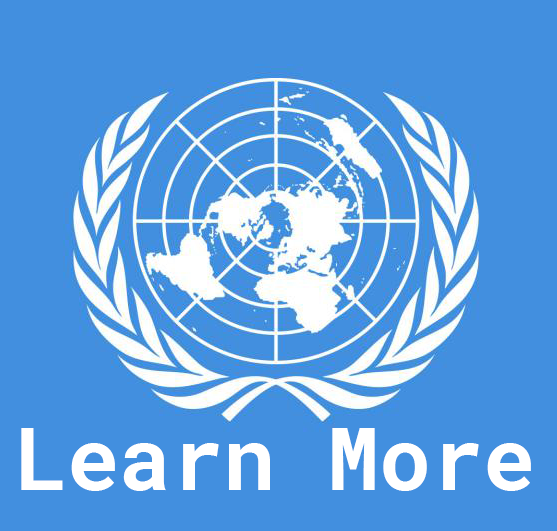
<style>
.page{position:relative;width:557px;height:531px;background:#428fdf}
.page>*{position:absolute;margin:0}
.t1{font:86.6px "RobotoMono-Bold";color:#ffffff}
</style>
<div class="page">
<p class="t1" style="left:21px;top:428px;width:510px;height:63px">Learn More</p>
</div>
